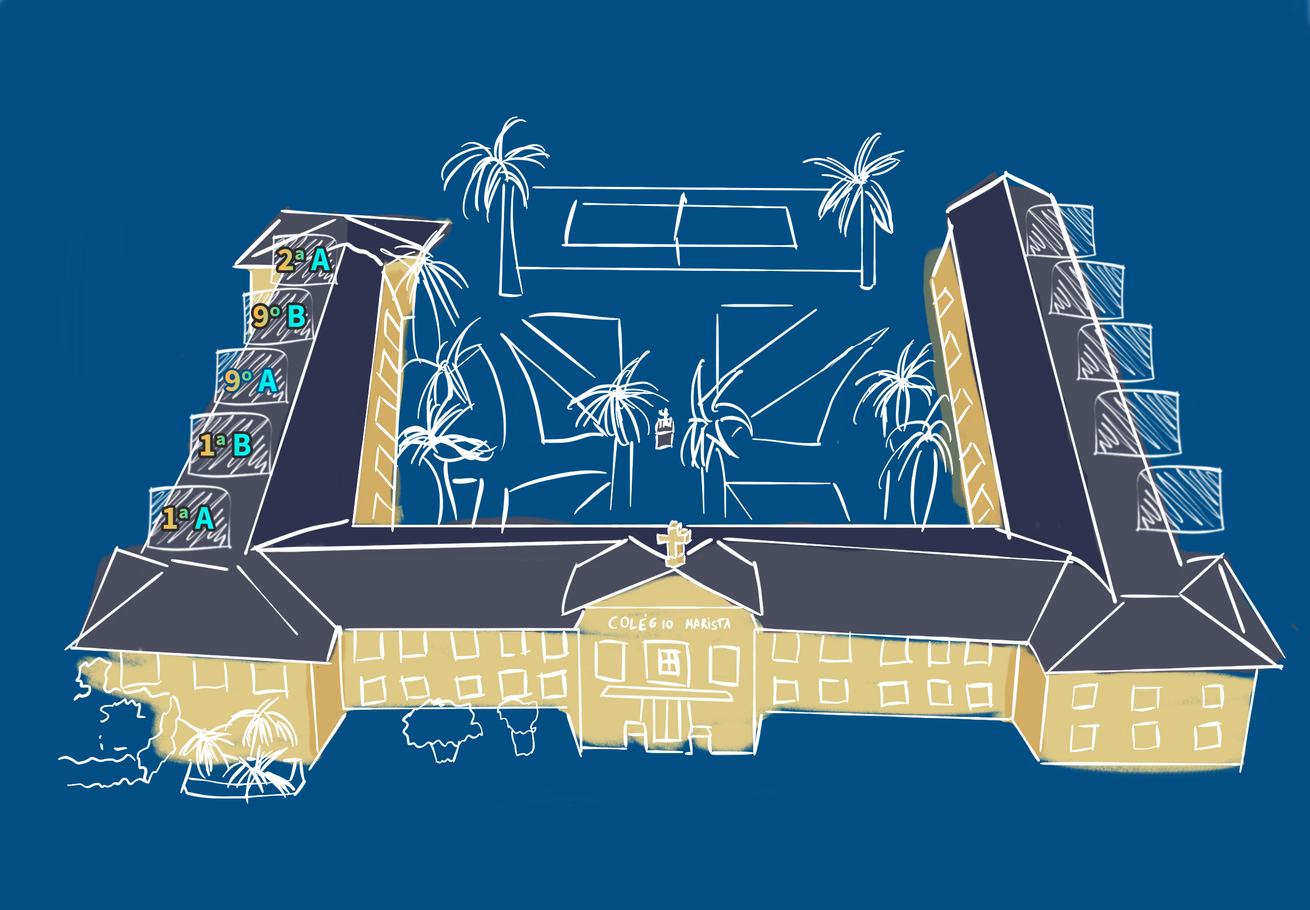
<style>
.page{position:relative;width:1310px;height:910px;background:#004e84}
.page>*{position:absolute;margin:0}
.t1{font:32.2px "SourceSansPro-Bold"}
</style>
<div class="page">
<p class="t1" style="left:278px;top:249px;width:52px;height:21px">2a A</p>
<p class="t1" style="left:254px;top:305px;width:51px;height:22px">9o B</p>
<p class="t1" style="left:225px;top:370px;width:52px;height:21px">9o A</p>
<p class="t1" style="left:201px;top:434px;width:49px;height:22px">1a B</p>
<p class="t1" style="left:164px;top:507px;width:50px;height:22px">1a A</p>
</div>
